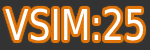
<style>
.page{position:relative;width:150px;height:50px;background:#333333}
.page>*{position:absolute;margin:0}
.t1{font:42.6px "DejaVuSans";color:#ffffff;scale:0.81 1}
</style>
<div class="page">
<p class="t1" style="left:5px;top:8px;width:139px;height:33px">VSIM:25</p>
</div>
